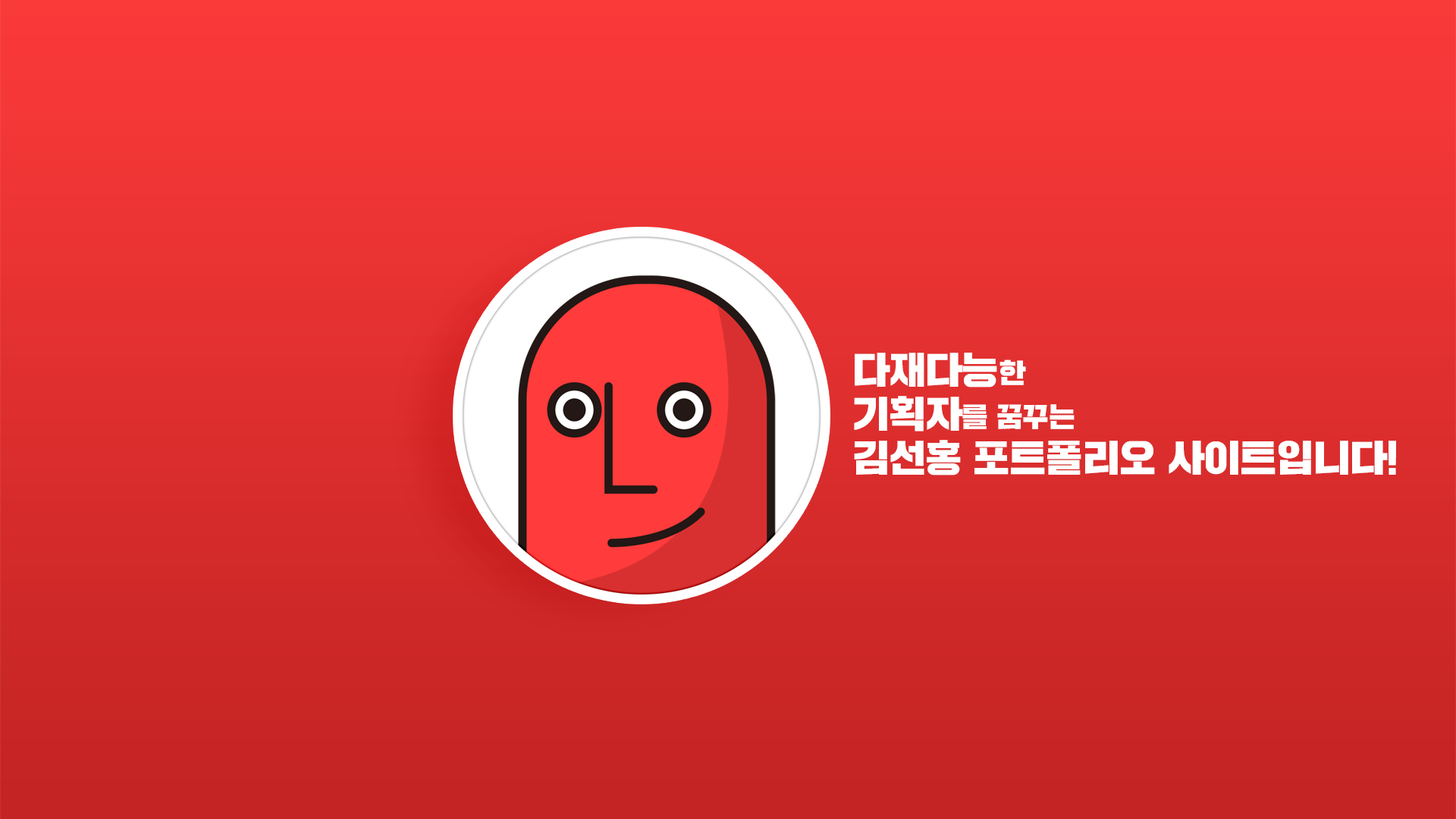
<style>
.page{position:relative;width:1456px;height:819px}
.page>*{position:absolute;margin:0}
.t1{font:36.6px "SDGdGothic";color:#ffffff}
.t2{font:26.3px "SDGdGothic";color:#ffffff}
</style>
<div class="page">
<p class="t1" style="left:854px;top:353px;width:542px;height:122px">다재다능<span class="t2">한 <br></span>기획자<span class="t2">를 꿈꾸는 <br></span>김선홍 포트폴리오 사이트입니다!</p>
</div>
